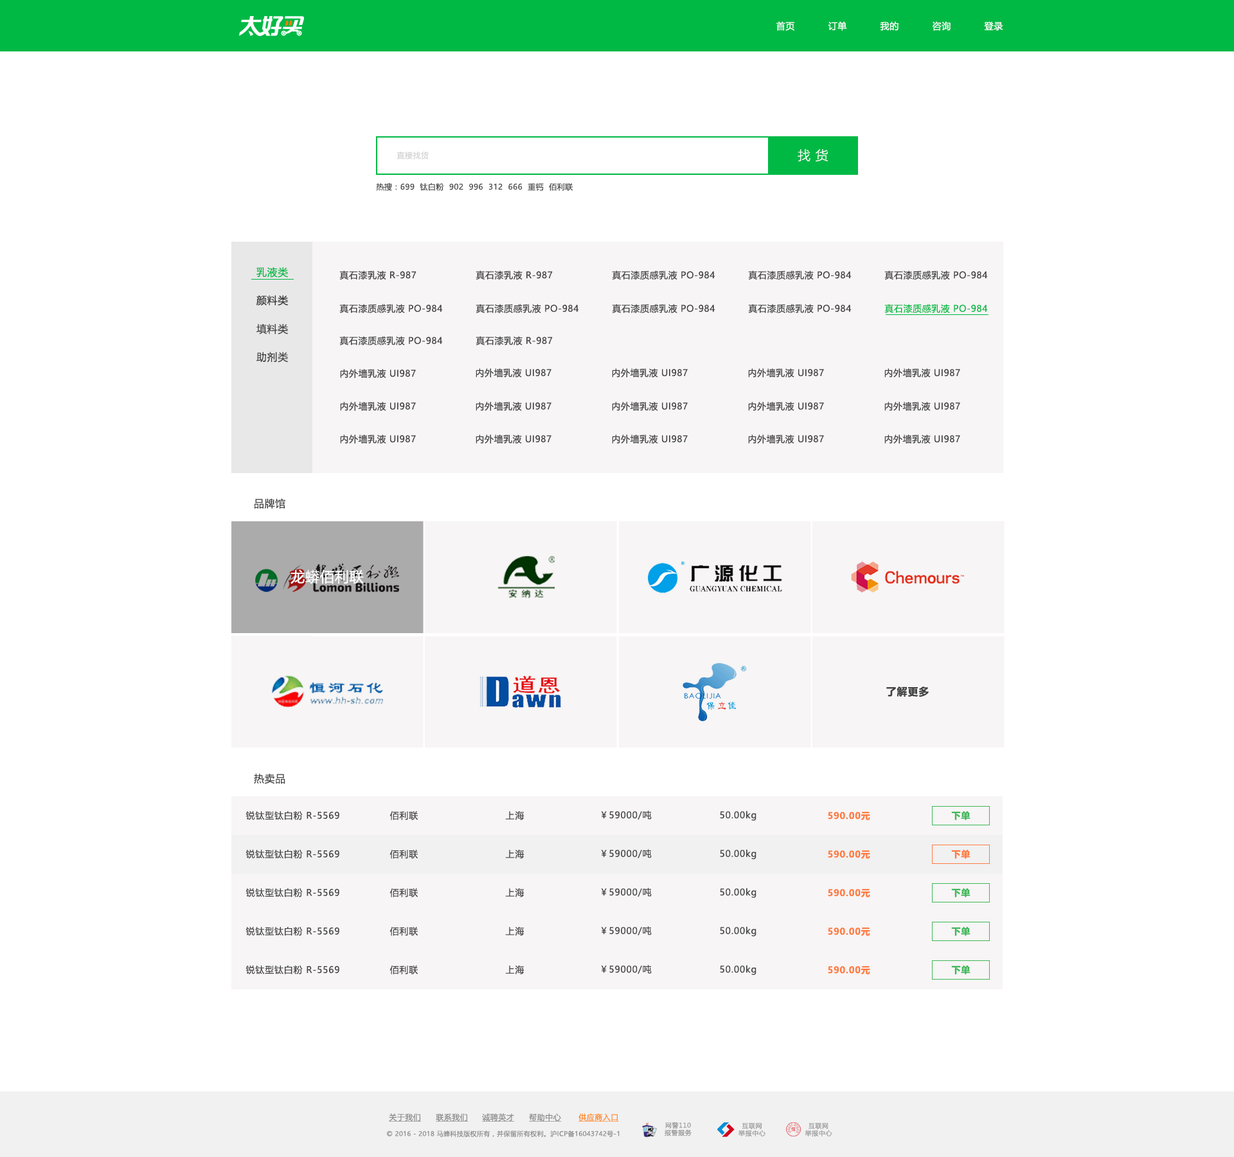
<style>
.page{position:relative;width:1234px;height:1157px;background:#ffffff}
.page>*{position:absolute;margin:0}
.t1{font:9px "MicrosoftYaHeiUI";letter-spacing:0.04em;color:#ffffff}
.t2{font:12.9px "MicrosoftYaHeiUILight";letter-spacing:0.38em;color:#ffffff}
.t3{font:7.7px "MicrosoftYaHeiUI";letter-spacing:0.04em;color:#d2d2d2}
.t4{font:7.7px "MicrosoftYaHeiUI";letter-spacing:0.04em;color:#444444}
.t5{font:10.3px "MicrosoftYaHeiUI";letter-spacing:0.04em;color:#00b945}
.t6{font:9px "MicrosoftYaHeiUI";letter-spacing:0.04em;color:#424242}
.t7{font:10.3px "MicrosoftYaHeiUI";letter-spacing:0.04em;color:#313131}
.t8{font:9px "MicrosoftYaHeiUI";letter-spacing:0.04em;color:#414141}
.t9{font:9px "MicrosoftYaHeiUI";letter-spacing:0.04em;color:#00b945}
.t10{font:10.3px "MicrosoftYaHeiUI";letter-spacing:0.04em;color:#424242}
.t11{font:14.1px "MicrosoftYaHeiUI";letter-spacing:0.04em;color:#ffffff}
.t12{font:10.3px "MicrosoftYaHeiUI-Bold";letter-spacing:0.06em;color:#424242}
.t13{font:9px "MicrosoftYaHeiUI";letter-spacing:0.06em;color:#444444}
.t14{font:9px "MicrosoftYaHeiUI-Bold";letter-spacing:0.06em;color:#ff7b41}
.t15{font:9px "MicrosoftYaHeiUI-Bold";letter-spacing:0.06em;color:#3db858}
.t16{font:7.7px "MicrosoftYaHeiUI";letter-spacing:0.04em;color:#8c8c8c;text-decoration:underline}
.t17{font:7.7px "MicrosoftYaHeiUI";letter-spacing:0.04em;color:#ff8b25;text-decoration:underline}
.t18{font:6.4px/7.5px "MicrosoftYaHei";letter-spacing:0.06em;color:#999999}
.t19{font:6.4px "MicrosoftYaHeiUI";letter-spacing:0.04em;color:#8c8c8c}
</style>
<div class="page">
<p class="t1" style="left:777px;top:21px;width:18px;height:10px">首页</p>
<p class="t1" style="left:828px;top:21px;width:19px;height:10px">订单</p>
<p class="t1" style="left:880px;top:21px;width:19px;height:10px">我的</p>
<p class="t1" style="left:933px;top:21px;width:18px;height:10px">咨询</p>
<p class="t1" style="left:984px;top:21px;width:20px;height:10px">登录</p>
<p class="t2" style="left:798px;top:149px;width:30px;height:13px">找货</p>
<p class="t3" style="left:397px;top:151px;width:32px;height:8px">直接找货</p>
<p class="t4" style="left:376px;top:183px;width:197px;height:8px">热搜：699  钛白粉  902  996  312  666  重钙  佰利联</p>
<p class="t5" style="left:256px;top:267px;width:33px;height:11px">乳液类</p>
<p class="t6" style="left:339px;top:271px;width:78px;height:9px">真石漆乳液 R-987</p>
<p class="t6" style="left:476px;top:271px;width:77px;height:9px">真石漆乳液 R-987</p>
<p class="t6" style="left:612px;top:271px;width:104px;height:9px">真石漆质感乳液 PO-984</p>
<p class="t6" style="left:748px;top:271px;width:104px;height:9px">真石漆质感乳液 PO-984</p>
<p class="t6" style="left:885px;top:271px;width:103px;height:9px">真石漆质感乳液 PO-984</p>
<p class="t7" style="left:256px;top:295px;width:33px;height:11px">颜料类</p>
<p class="t6" style="left:339px;top:304px;width:104px;height:9px">真石漆质感乳液 PO-984</p>
<p class="t6" style="left:476px;top:304px;width:103px;height:9px">真石漆质感乳液 PO-984</p>
<p class="t6" style="left:612px;top:304px;width:104px;height:9px">真石漆质感乳液 PO-984</p>
<p class="t8" style="left:748px;top:304px;width:104px;height:9px">真石漆质感乳液 PO-984</p>
<p class="t9" style="left:885px;top:304px;width:103px;height:9px">真石漆质感乳液 PO-984</p>
<p class="t10" style="left:256px;top:324px;width:33px;height:10px">填料类</p>
<p class="t6" style="left:339px;top:336px;width:104px;height:9px">真石漆质感乳液 PO-984</p>
<p class="t6" style="left:476px;top:336px;width:77px;height:9px">真石漆乳液 R-987</p>
<p class="t10" style="left:256px;top:352px;width:33px;height:11px">助剂类</p>
<p class="t6" style="left:340px;top:369px;width:76px;height:9px">内外墙乳液 UI987</p>
<p class="t6" style="left:476px;top:368px;width:76px;height:9px">内外墙乳液 UI987</p>
<p class="t6" style="left:612px;top:368px;width:76px;height:9px">内外墙乳液 UI987</p>
<p class="t6" style="left:748px;top:368px;width:76px;height:9px">内外墙乳液 UI987</p>
<p class="t6" style="left:885px;top:368px;width:75px;height:9px">内外墙乳液 UI987</p>
<p class="t6" style="left:340px;top:402px;width:76px;height:9px">内外墙乳液 UI987</p>
<p class="t6" style="left:476px;top:402px;width:76px;height:9px">内外墙乳液 UI987</p>
<p class="t6" style="left:612px;top:402px;width:76px;height:9px">内外墙乳液 UI987</p>
<p class="t6" style="left:748px;top:402px;width:76px;height:9px">内外墙乳液 UI987</p>
<p class="t6" style="left:885px;top:402px;width:75px;height:9px">内外墙乳液 UI987</p>
<p class="t6" style="left:340px;top:435px;width:76px;height:9px">内外墙乳液 UI987</p>
<p class="t6" style="left:476px;top:435px;width:76px;height:9px">内外墙乳液 UI987</p>
<p class="t6" style="left:612px;top:435px;width:76px;height:9px">内外墙乳液 UI987</p>
<p class="t6" style="left:748px;top:435px;width:76px;height:9px">内外墙乳液 UI987</p>
<p class="t6" style="left:885px;top:435px;width:75px;height:9px">内外墙乳液 UI987</p>
<p class="t10" style="left:255px;top:498px;width:30px;height:11px">品牌馆</p>
<p class="t11" style="left:291px;top:570px;width:73px;height:14px">龙蟒佰利联</p>
<p class="t12" style="left:887px;top:687px;width:42px;height:11px">了解更多</p>
<p class="t10" style="left:254px;top:773px;width:31px;height:11px">热卖品</p>
<p class="t13" style="left:246px;top:811px;width:93px;height:9px">锐钛型钛白粉 R-5569</p>
<p class="t13" style="left:390px;top:811px;width:28px;height:9px">佰利联</p>
<p class="t13" style="left:505px;top:811px;width:20px;height:9px">上海</p>
<p class="t13" style="left:601px;top:811px;width:51px;height:9px">￥59000/吨</p>
<p class="t13" style="left:720px;top:811px;width:37px;height:10px">50.00kg</p>
<p class="t14" style="left:828px;top:812px;width:42px;height:8px">590.00元</p>
<p class="t15" style="left:951px;top:811px;width:20px;height:9px">下单</p>
<p class="t13" style="left:246px;top:849px;width:93px;height:10px">锐钛型钛白粉 R-5569</p>
<p class="t13" style="left:390px;top:850px;width:28px;height:9px">佰利联</p>
<p class="t13" style="left:505px;top:850px;width:20px;height:9px">上海</p>
<p class="t13" style="left:601px;top:849px;width:51px;height:9px">￥59000/吨</p>
<p class="t13" style="left:720px;top:849px;width:37px;height:11px">50.00kg</p>
<p class="t14" style="left:828px;top:851px;width:42px;height:8px">590.00元</p>
<p class="t14" style="left:951px;top:850px;width:20px;height:9px">下单</p>
<p class="t13" style="left:246px;top:888px;width:93px;height:9px">锐钛型钛白粉 R-5569</p>
<p class="t13" style="left:390px;top:888px;width:28px;height:9px">佰利联</p>
<p class="t13" style="left:505px;top:888px;width:20px;height:9px">上海</p>
<p class="t13" style="left:601px;top:888px;width:51px;height:9px">￥59000/吨</p>
<p class="t13" style="left:720px;top:888px;width:37px;height:10px">50.00kg</p>
<p class="t14" style="left:828px;top:889px;width:42px;height:8px">590.00元</p>
<p class="t15" style="left:951px;top:888px;width:20px;height:9px">下单</p>
<p class="t13" style="left:246px;top:926px;width:93px;height:10px">锐钛型钛白粉 R-5569</p>
<p class="t13" style="left:390px;top:927px;width:28px;height:9px">佰利联</p>
<p class="t13" style="left:505px;top:927px;width:20px;height:9px">上海</p>
<p class="t13" style="left:601px;top:926px;width:51px;height:9px">￥59000/吨</p>
<p class="t13" style="left:720px;top:926px;width:37px;height:11px">50.00kg</p>
<p class="t14" style="left:828px;top:928px;width:42px;height:8px">590.00元</p>
<p class="t15" style="left:951px;top:927px;width:20px;height:9px">下单</p>
<p class="t13" style="left:246px;top:965px;width:93px;height:10px">锐钛型钛白粉 R-5569</p>
<p class="t13" style="left:390px;top:966px;width:28px;height:9px">佰利联</p>
<p class="t13" style="left:505px;top:966px;width:20px;height:9px">上海</p>
<p class="t13" style="left:601px;top:965px;width:51px;height:9px">￥59000/吨</p>
<p class="t13" style="left:720px;top:965px;width:37px;height:10px">50.00kg</p>
<p class="t15" style="left:951px;top:966px;width:20px;height:9px">下单</p>
<p class="t14" style="left:828px;top:966px;width:42px;height:9px">590.00元</p>
<p class="t16" style="left:389px;top:1113px;width:33px;height:9px">关于我们</p>
<p class="t16" style="left:436px;top:1113px;width:33px;height:9px">联系我们</p>
<p class="t16" style="left:482px;top:1113px;width:33px;height:9px">诚聘英才</p>
<p class="t16" style="left:529px;top:1113px;width:33px;height:9px">帮助中心</p>
<p class="t17" style="left:579px;top:1113px;width:40px;height:9px">供应商入口</p>
<p class="t18" style="left:665px;top:1122px;width:27px;height:15px;text-align:center">网警110<br>报警服务</p>
<p class="t19" style="left:387px;top:1130px;width:233px;height:7px">© 2016 - 2018 马蜂科技版权所有，并保留所有权利。沪ICP备16043742号-1</p>
<p class="t18" style="left:739px;top:1122px;width:27px;height:15px;text-align:center">互联网<br>举报中心</p>
<p class="t18" style="left:805px;top:1122px;width:28px;height:15px;text-align:center">互联网<br>举报中心</p>
</div>
